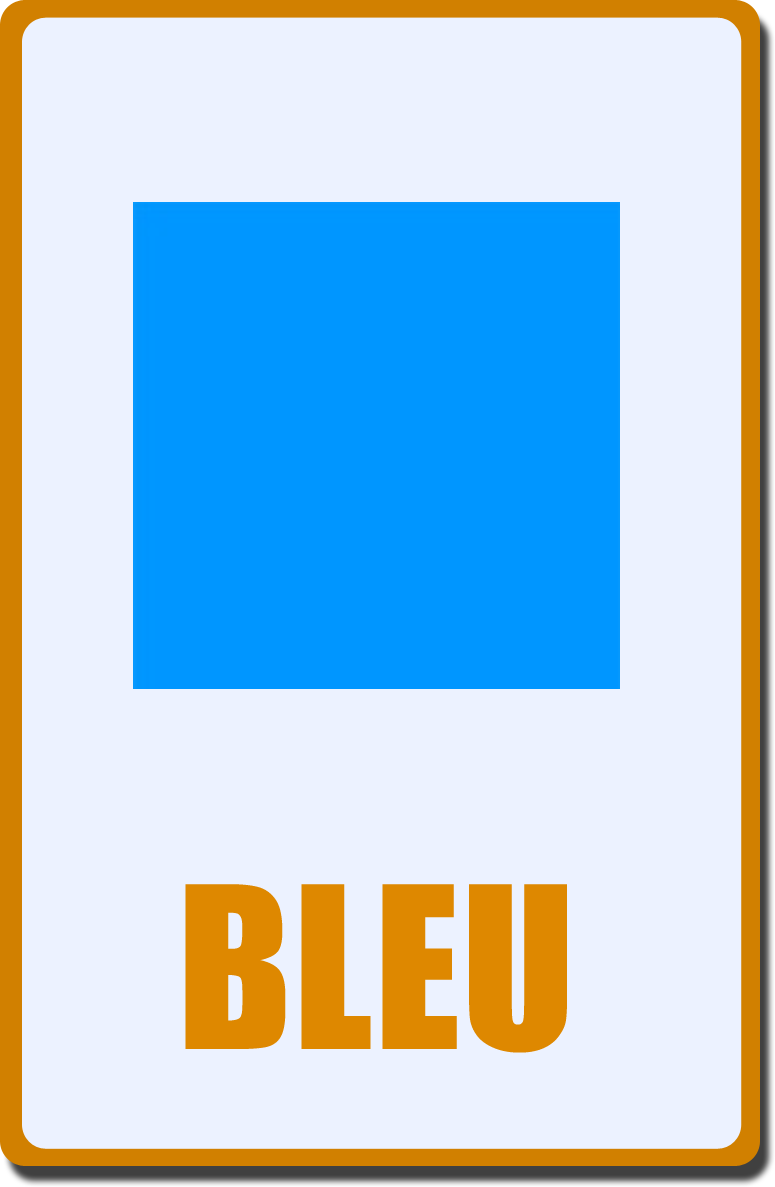
<style>
.page{position:relative;width:775px;height:1187px;background:#ecf2ff}
.page>*{position:absolute;margin:0}
.t1{font:208.3px "Impact";letter-spacing:0.005em;color:#de8800}
</style>
<div class="page">
<p class="t1" style="left:185px;top:884px;width:382px;height:169px">BLEU</p>
</div>
